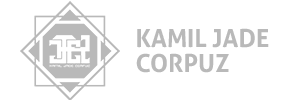
<style>
.page{position:relative;width:300px;height:100px;background:#ffffff}
.page>*{position:absolute;margin:0}
.t1{font:25px/25px "Aller-Bold";color:#b9b9b9}
</style>
<div class="page">
<p class="t1" style="left:136px;top:28px;width:133px;height:45px">KAMIL JADE<br>CORPUZ</p>
</div>
